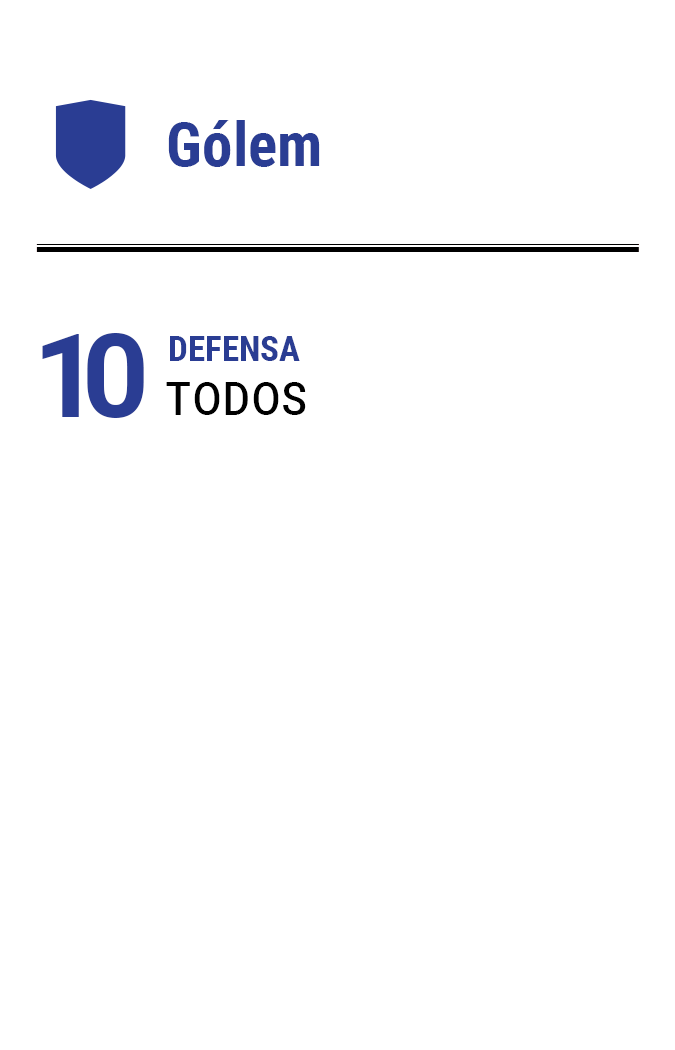
<style>
.page{position:relative;width:675px;height:1050px;background:#ffffff}
.page>*{position:absolute;margin:0}
.t1{font:61.2px "RobotoCondensed-Bold";color:#2a3d93}
.t2{font:116.7px "Roboto-Bold";letter-spacing:-0.16em;color:#2a3d93}
.t3{font:35px "RobotoCondensed-Bold";color:#2a3d93}
.t4{font:58.3px "RobotoCondensed-Regular";color:#000000;font-variant:small-caps}
</style>
<div class="page">
<p class="t1" style="left:168px;top:120px;width:152px;height:47px">Gólem</p>
<p class="t2" style="left:42px;top:333px;width:102px;height:85px">10</p>
<p class="t3" style="left:170px;top:336px;width:130px;height:25px">DEFENSA</p>
<p class="t4" style="left:166px;top:382px;width:140px;height:33px">todos</p>
</div>
